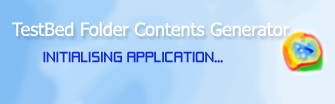
<style>
.page{position:relative;width:335px;height:104px}
.page>*{position:absolute;margin:0}
.t1{font:18px "Tahoma";color:#ffffff}
.t2{font:14px "ZeroThrees";color:#132ed4}
</style>
<div class="page">
<p class="t1" style="left:12px;top:22px;width:277px;height:15px">TestBed Folder Contents Generator</p>
<p class="t2" style="left:43px;top:51px;width:180px;height:12px">INITIALISING APPLICATION...</p>
</div>
